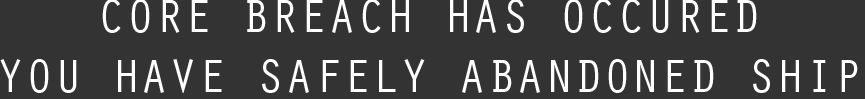
<style>
.page{position:relative;width:865px;height:99px;background:#333333}
.page>*{position:absolute;margin:0}
.t1{font:48.3px "OratorStd";color:#ffffff}
</style>
<div class="page">
<p class="t1" style="left:102px;top:0px;width:655px;height:33px">CORE BREACH HAS OCCURED</p>
<p class="t1" style="left:0px;top:59px;width:858px;height:34px">YOU HAVE SAFELY ABANDONED SHIP</p>
</div>
